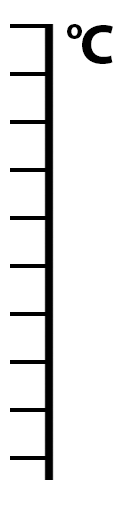
<style>
.page{position:relative;width:128px;height:512px;background:#ffffff}
.page>*{position:absolute;margin:0}
.t1{font:30px "MyriadPro-Bold";letter-spacing:0.025em;color:#000000}
.t2{font:57px "MyriadPro-Bold";letter-spacing:0.025em;color:#000000}
</style>
<div class="page">
<p class="t1" style="left:67px;top:24px;width:15px;height:15px">o</p>
<p class="t2" style="left:82px;top:25px;width:31px;height:39px">C</p>
</div>
